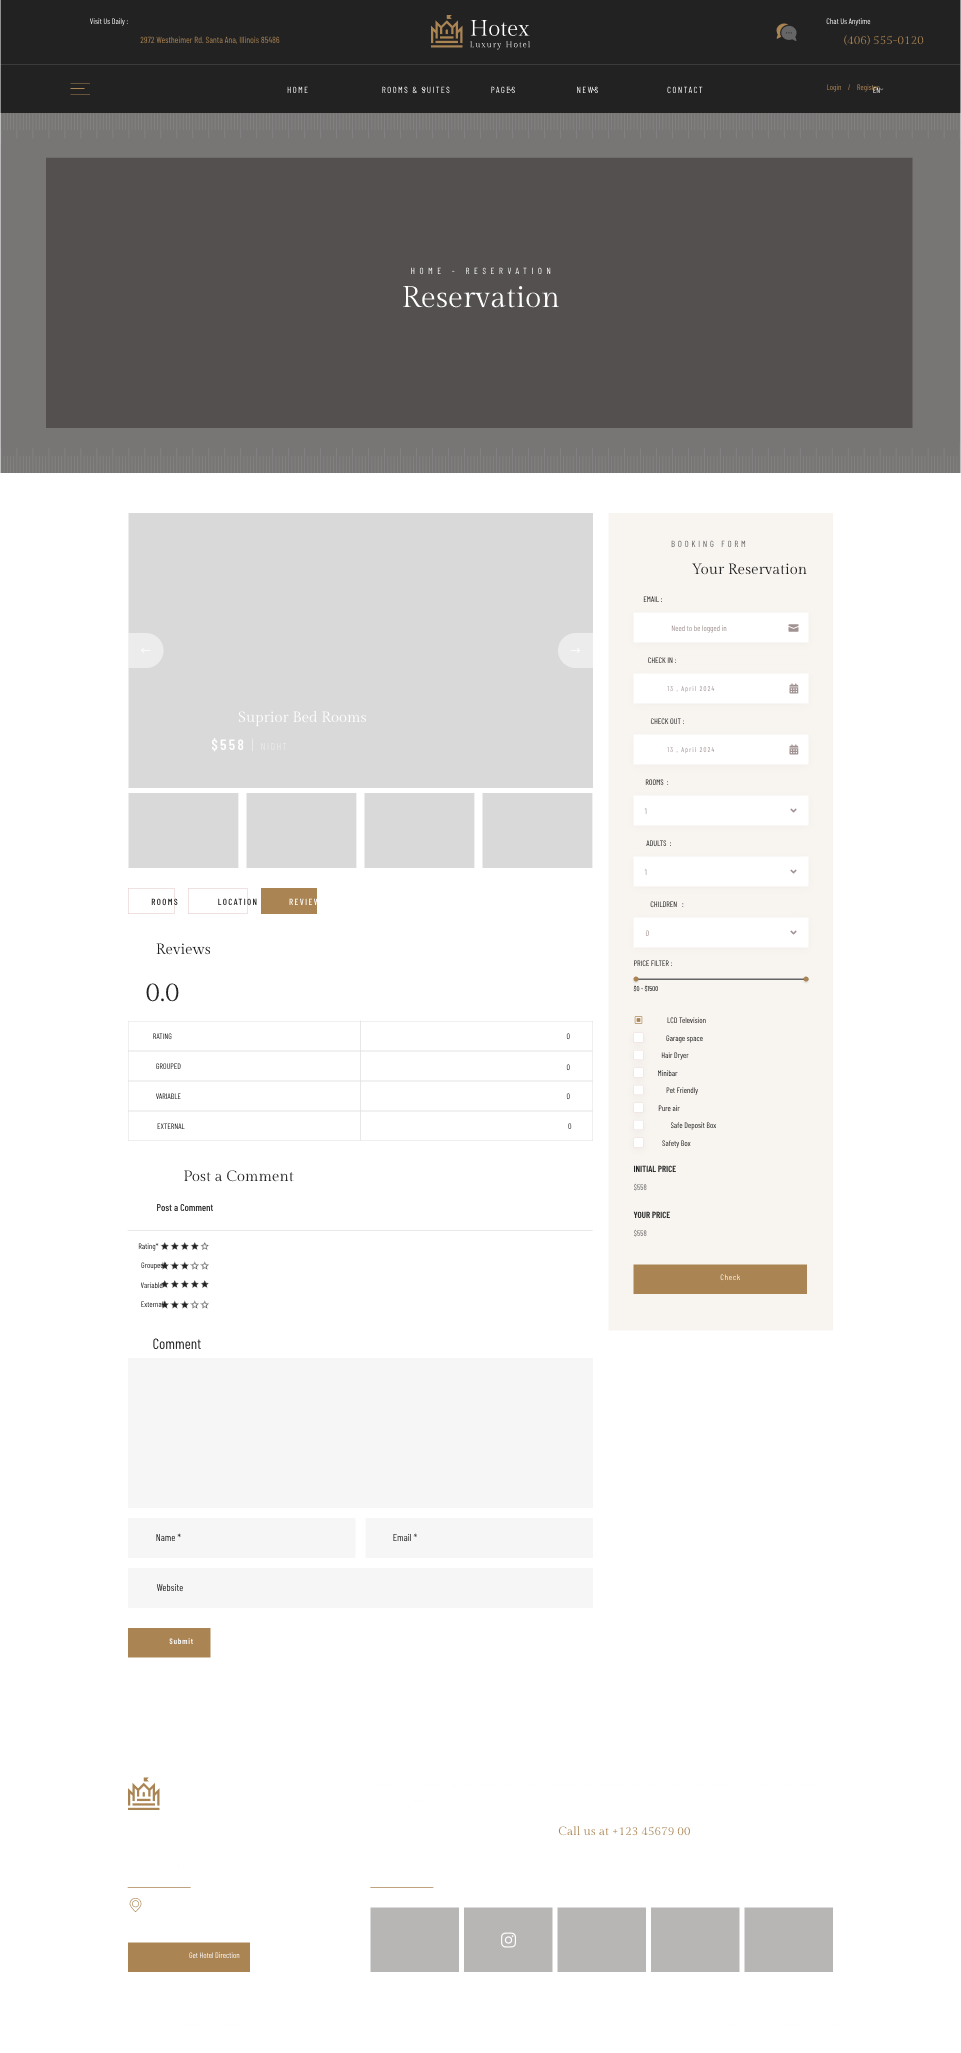
<style>
.page{position:relative;width:961px;height:2053px;background:#ffffff}
.page>*{position:absolute;margin:0}
.t1{font:8px "BarlowCondensed-Regular"}
.t2{font:9px "BarlowCondensed-Regular";color:#aa8453}
.t3{font:12px "GildaDisplay-Regular";color:#aa8453}
.t4{font:9px "BarlowCondensed-Regular";letter-spacing:0.15em;text-transform:uppercase}
.t5{font:9px "BarlowCondensed-Regular";letter-spacing:0.5em;color:#ffffff;text-transform:uppercase}
.t6{font:30px "GildaDisplay-Regular";color:#ffffff}
.t7{font:9px "BarlowCondensed-Regular";letter-spacing:0.3em;text-transform:uppercase}
.t8{font:15px "GildaDisplay-Regular";color:#222222}
.t9{font:8px "BarlowCondensed-Regular";color:#222222;text-transform:uppercase}
.t10{font:8px "BarlowCondensed-Regular";color:#a19292}
.t11{font:8px "BarlowCondensed-Regular";text-transform:uppercase}
.t12{font:7px "BarlowCondensed-Regular";letter-spacing:0.15em}
.t13{font:15px "GildaDisplay-Regular";color:#ffffff}
.t14{font:10px "BarlowCondensed-Thin";letter-spacing:0.15em;color:#ffffff;text-transform:uppercase}
.t15{font:15px "BarlowCondensed-SemiBold";letter-spacing:0.15em;color:#ffffff;text-transform:uppercase}
.t16{font:15px "BarlowCondensed-Thin";letter-spacing:0.15em;color:#ffffff;text-transform:uppercase}
.t17{font:9px "BarlowCondensed-Medium";letter-spacing:0.15em;text-transform:uppercase}
.t18{font:9px "BarlowCondensed-Medium";letter-spacing:0.15em;color:#222222;text-transform:uppercase}
.t19{font:9px "BarlowCondensed-Medium";letter-spacing:0.15em;color:#ffffff;text-transform:uppercase}
.t20{font:27px "GildaDisplay-Regular";color:#222222}
.t21{font:7px "BarlowCondensed-Regular";text-transform:uppercase}
.t22{font:9px "BarlowCondensed-SemiBold";color:#222222;text-transform:uppercase}
.t23{font:10px "BarlowCondensed-Medium";color:#222222}
.t24{font:8px "BarlowCondensed-Regular";letter-spacing:0.1em}
.t25{font:8px "BarlowCondensed-Regular";color:#222222}
.t26{font:15px "BarlowCondensed-Regular";color:#222222}
.t27{font:10px "BarlowCondensed-Regular";color:#222222}
.t28{font:10px "BarlowCondensed-Regular"}
.t29{font:8px "BarlowCondensed-SemiBold";letter-spacing:0.1em;color:#ffffff}
</style>
<div class="page">
<p class="t1" style="left:90px;top:18px;width:38px;height:8px">Visit Us Daily :</p>
<p class="t1" style="left:826px;top:18px;width:45px;height:8px">Chat Us Anytime</p>
<p class="t2" style="left:140px;top:36px;width:140px;height:8px">2972 Westheimer Rd. Santa Ana, Illinois 85486</p>
<p class="t3" style="left:844px;top:35px;width:80px;height:11px">(406) 555-0120</p>
<p class="t4" style="left:287px;top:86px;width:21px;height:8px">Home</p>
<p class="t4" style="left:382px;top:86px;width:68px;height:8px">Rooms &amp; Suites</p>
<p class="t4" style="left:491px;top:86px;width:24px;height:8px">Pages</p>
<p class="t4" style="left:577px;top:86px;width:21px;height:8px">News</p>
<p class="t4" style="left:667px;top:86px;width:36px;height:8px">Contact</p>
<p class="t1" style="left:827px;top:84px;width:53px;height:8px">Login    /    Register</p>
<p class="t1" style="left:873px;top:87px;width:7px;height:6px">EN</p>
<p class="t5" style="left:411px;top:267px;width:140px;height:8px">Home - Reservation</p>
<p class="t6" style="left:403px;top:286px;width:157px;height:22px">Reservation</p>
<p class="t7" style="left:671px;top:540px;width:75px;height:8px">Booking Form</p>
<p class="t8" style="left:691px;top:563px;width:116px;height:12px">Your Reservation</p>
<p class="t9" style="left:643px;top:596px;width:19px;height:6px">Email :</p>
<p class="t10" style="left:671px;top:625px;width:56px;height:8px">Need to be logged in</p>
<p class="t11" style="left:648px;top:657px;width:28px;height:7px">Check in :</p>
<p class="t12" style="left:667px;top:686px;width:48px;height:7px">13 , April 2024</p>
<p class="t13" style="left:238px;top:710px;width:129px;height:17px">Suprior Bed Rooms</p>
<p class="t11" style="left:650px;top:718px;width:34px;height:7px">Check Out :</p>
<p class="t14" style="left:211px;top:738px;width:76px;height:14px"><span class="t15">$558 </span><span class="t16">| </span>Night</p>
<p class="t12" style="left:667px;top:747px;width:48px;height:7px">13 , April 2024</p>
<p class="t11" style="left:645px;top:779px;width:24px;height:7px">Rooms  :</p>
<p class="t1" style="left:644px;top:808px;width:3px;height:6px">1</p>
<p class="t11" style="left:646px;top:840px;width:25px;height:7px">adults  :</p>
<p class="t1" style="left:644px;top:869px;width:3px;height:6px">1</p>
<p class="t17" style="left:151px;top:898px;width:27px;height:8px">Rooms</p>
<p class="t18" style="left:218px;top:898px;width:39px;height:8px">Location</p>
<p class="t19" style="left:289px;top:898px;width:36px;height:8px">Reviews</p>
<p class="t11" style="left:650px;top:901px;width:34px;height:7px">Children   :</p>
<p class="t1" style="left:645px;top:930px;width:4px;height:7px">0</p>
<p class="t8" style="left:156px;top:943px;width:55px;height:12px">Reviews</p>
<p class="t11" style="left:634px;top:960px;width:38px;height:7px">Price filter :</p>
<p class="t20" style="left:146px;top:983px;width:33px;height:19px">0.0</p>
<p class="t21" style="left:633px;top:985px;width:25px;height:7px">$0 - $1500</p>
<p class="t1" style="left:667px;top:1017px;width:39px;height:7px">LCD Television</p>
<p class="t9" style="left:153px;top:1033px;width:19px;height:7px">Rating</p>
<p class="t1" style="left:566px;top:1033px;width:4px;height:7px">0</p>
<p class="t1" style="left:666px;top:1035px;width:37px;height:8px">Garage space</p>
<p class="t1" style="left:661px;top:1052px;width:28px;height:8px">Hair Dryer</p>
<p class="t11" style="left:156px;top:1063px;width:25px;height:7px">grouped</p>
<p class="t1" style="left:566px;top:1064px;width:4px;height:7px">0</p>
<p class="t1" style="left:658px;top:1070px;width:20px;height:7px">Minibar</p>
<p class="t9" style="left:156px;top:1093px;width:25px;height:6px">variable</p>
<p class="t1" style="left:566px;top:1093px;width:4px;height:7px">0</p>
<p class="t1" style="left:666px;top:1087px;width:32px;height:8px">Pet Friendly</p>
<p class="t1" style="left:658px;top:1105px;width:22px;height:7px">Pure air</p>
<p class="t9" style="left:157px;top:1123px;width:28px;height:6px">external</p>
<p class="t1" style="left:568px;top:1123px;width:4px;height:7px">0</p>
<p class="t1" style="left:670px;top:1122px;width:47px;height:8px">Safe Deposit Box</p>
<p class="t1" style="left:662px;top:1140px;width:29px;height:8px">Safety Box</p>
<p class="t22" style="left:633px;top:1165px;width:43px;height:8px">Initial Price</p>
<p class="t8" style="left:184px;top:1170px;width:110px;height:12px">Post a Comment</p>
<p class="t1" style="left:633px;top:1183px;width:14px;height:8px">$558</p>
<p class="t23" style="left:157px;top:1203px;width:56px;height:9px">Post a Comment</p>
<p class="t22" style="left:633px;top:1211px;width:37px;height:8px">Your Price</p>
<p class="t1" style="left:633px;top:1229px;width:14px;height:8px">$558</p>
<p class="t1" style="left:138px;top:1243px;width:21px;height:8px">Rating*</p>
<p class="t1" style="left:141px;top:1262px;width:26px;height:8px">Grouped*</p>
<p class="t24" style="left:720px;top:1274px;width:20px;height:7px">Check</p>
<p class="t1" style="left:140px;top:1282px;width:26px;height:7px">Variable*</p>
<p class="t25" style="left:141px;top:1301px;width:25px;height:7px">External*</p>
<p class="t26" style="left:153px;top:1338px;width:48px;height:12px">Comment</p>
<p class="t27" style="left:156px;top:1533px;width:25px;height:9px">Name *</p>
<p class="t28" style="left:393px;top:1533px;width:24px;height:9px">Email *</p>
<p class="t28" style="left:156px;top:1583px;width:27px;height:9px">Website</p>
<p class="t29" style="left:169px;top:1638px;width:24px;height:7px">Submit</p>
<p class="t3" style="left:558px;top:1826px;width:132px;height:10px">Call us at +123 45679 00</p>
<p class="t1" style="left:189px;top:1952px;width:51px;height:7px">Get Hotel Direction</p>
</div>
